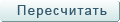
<style>
.page{position:relative;width:120px;height:22px}
.page>*{position:absolute;margin:0}
.t1{font:13px "ArialMT";letter-spacing:0.099em;color:#345a70}
</style>
<div class="page">
<p class="t1" style="left:17px;top:5px;width:90px;height:13px">Пересчитать</p>
</div>
